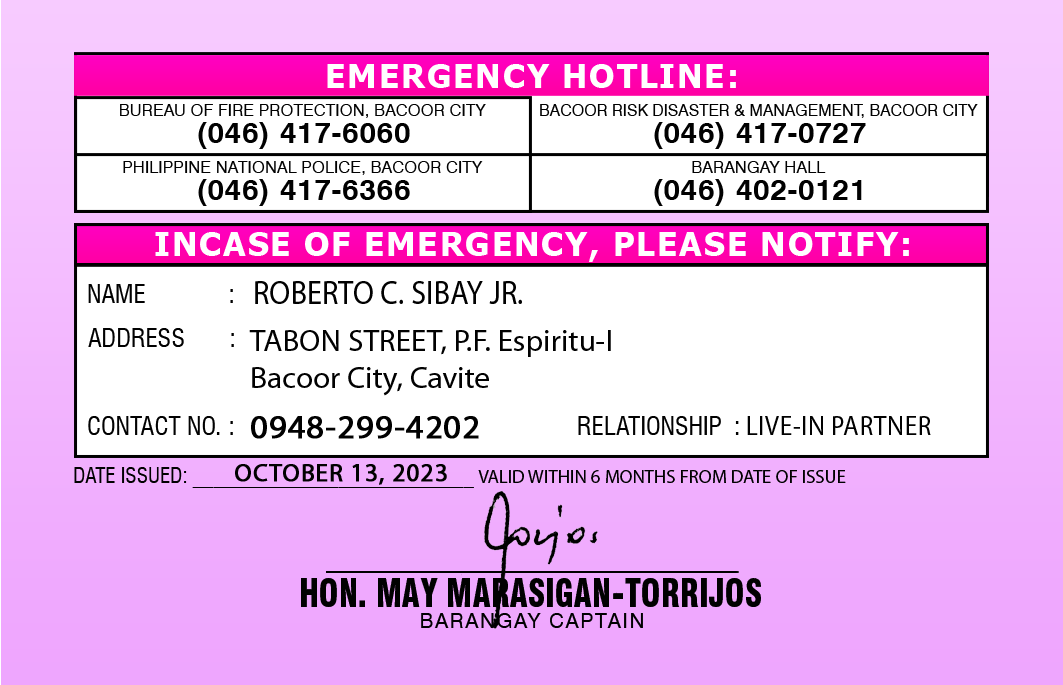
<style>
.page{position:relative;width:1063px;height:685px;background:#ffffff}
.page>*{position:absolute;margin:0}
.t1{font:33.3px "Tahoma-Bold";letter-spacing:0.05em;color:#ffffff}
.t2{font:16.7px "Swiss721BT-Roman";letter-spacing:0.005em;color:#010101;text-transform:uppercase}
.t3{font:16.7px "Swiss721BT-Roman";color:#010101;text-transform:uppercase}
.t4{font:29.2px "Swiss721BT-Bold";letter-spacing:0.025em;color:#010101;text-transform:uppercase}
.t5{font:33.3px "MyriadPro-Regular";letter-spacing:0.005em;color:#010101;text-transform:uppercase;scale:0.91 1}
.t6{font:25px "Swiss721BT-RomanCondensed";color:#010101}
.t7{font:31.3px "MyriadPro-Regular";color:#010101}
.t8{font:33.3px "MyriadPro-Regular";letter-spacing:0.025em;color:#010101;font-weight:bold}
.t9{font:27.3px "MyriadPro-Regular";letter-spacing:0.025em;color:#010101;scale:0.93 1}
.t10{font:20.8px "Swiss721BT-RomanCondensed";color:#010101;text-transform:uppercase}
.t11{font:25px "MyriadPro-Regular";letter-spacing:0.025em;color:#010101;font-weight:bold}
.t12{font:18.7px "MyriadPro-Regular";color:#010101;text-transform:uppercase}
.t13{font:37.5px "Swiss721BT-BlackCondensed";letter-spacing:0.01em;color:#010101;text-transform:uppercase;scale:0.86 1}
.t14{font:20.8px "Swiss721BT-Roman";letter-spacing:0.075em;color:#010101;text-transform:uppercase}
</style>
<div class="page">
<p class="t1" style="left:327px;top:64px;width:409px;height:24px">EMERGENCY HOTLINE:</p>
<p class="t2" style="left:120px;top:104px;width:366px;height:14px">BUREAU OF FIRE PROTECTION, BAcoor city</p>
<p class="t3" style="left:540px;top:104px;width:438px;height:14px">bacoor risk disaster &amp; management, BAcoor city</p>
<p class="t4" style="left:198px;top:122px;width:212px;height:27px">(046) 417-6060</p>
<p class="t4" style="left:654px;top:122px;width:212px;height:27px">(046) 417-0727</p>
<p class="t2" style="left:123px;top:161px;width:360px;height:14px">philippine national police, BAcoor city</p>
<p class="t2" style="left:692px;top:161px;width:134px;height:12px">barangay hall</p>
<p class="t4" style="left:198px;top:179px;width:212px;height:27px">(046) 417-6366</p>
<p class="t4" style="left:654px;top:179px;width:208px;height:27px">(046) 402-0121</p>
<p class="t1" style="left:155px;top:232px;width:754px;height:30px">INCASE OF EMERGENCY, PLEASE NOTIFY:</p>
<p class="t5" style="left:255px;top:281px;width:267px;height:23px">ROBERTO C. SIBAY JR.</p>
<p class="t6" style="left:88px;top:284px;width:145px;height:19px">NAME     :</p>
<p class="t6" style="left:88px;top:328px;width:146px;height:19px">ADDRESS   :</p>
<p class="t7" style="left:249px;top:330px;width:362px;height:66px">TABON STREET, P.F. Espiritu-I<br>Bacoor City, Cavite</p>
<p class="t6" style="left:88px;top:416px;width:145px;height:19px">CONTACT NO. :</p>
<p class="t8" style="left:251px;top:416px;width:228px;height:23px">0948-299-4202</p>
<p class="t6" style="left:578px;top:416px;width:161px;height:19px">RELATIONSHIP  :</p>
<p class="t9" style="left:747px;top:416px;width:184px;height:19px">LIVE-IN PARTNER</p>
<p class="t10" style="left:74px;top:467px;width:400px;height:21px">DATE ISSUED: ___________________________</p>
<p class="t11" style="left:235px;top:464px;width:212px;height:21px">OCTOBER 13, 2023</p>
<p class="t12" style="left:478px;top:470px;width:368px;height:13px">VALID WITHIN 6 MONTHS FROM DATE OF ISSUE</p>
<p class="t13" style="left:301px;top:578px;width:460px;height:29px">HON. may marasigan-torrijos</p>
<p class="t14" style="left:421px;top:613px;width:222px;height:15px">Barangay CAPTAIN</p>
</div>
